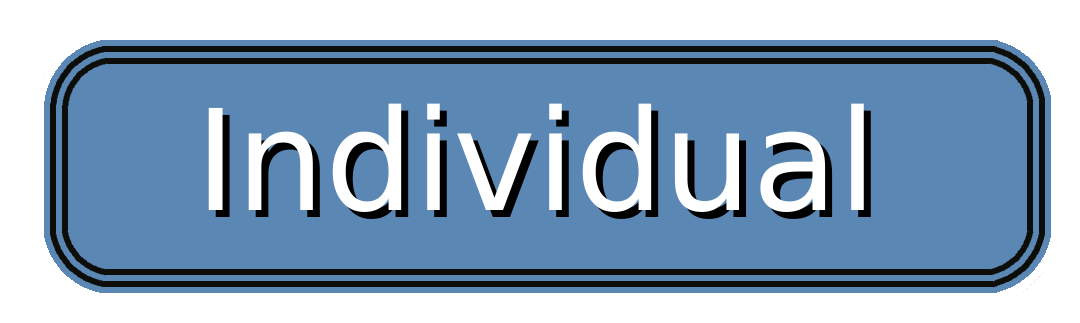
<style>
.page{position:relative;width:1080px;height:323px;background:#5b87b4}
.page>*{position:absolute;margin:0}
.t1{font:140px "DejaVuSans";color:#ffffff}
.t2{font:140px "DejaVuSans"}
</style>
<div class="page">
<p class="t1" style="left:208px;top:103px;width:656px;height:109px">Individual</p>
<p class="t2" style="left:215px;top:110px;width:656px;height:109px">Individual</p>
</div>
